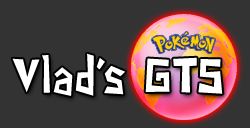
<style>
.page{position:relative;width:250px;height:128px;background:#333333}
.page>*{position:absolute;margin:0}
.t1{font:48px "PaperCuts2";color:#ffffff}
</style>
<div class="page">
<p class="t1" style="left:12px;top:53px;width:211px;height:43px">Vlad’s GTS</p>
</div>
